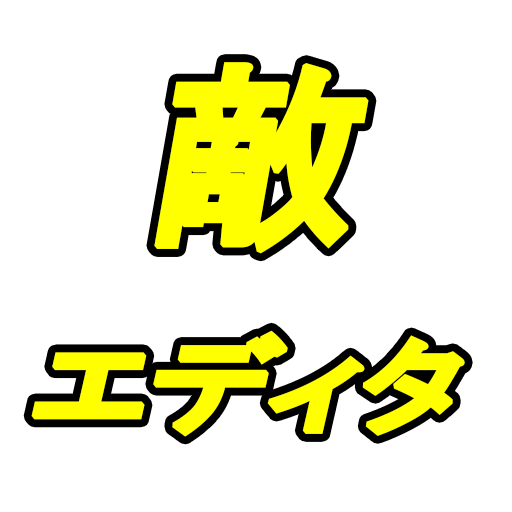
<style>
.page{position:relative;width:512px;height:512px;background:#ffffff}
.page>*{position:absolute;margin:0}
.t1{font:200px "HGPGothicE";letter-spacing:-0.07em;color:#ffff00;font-weight:bold;font-style:italic}
.t2{font:103.9px "HGPGothicE";letter-spacing:-0.07em;color:#ffff00;font-weight:bold;font-style:italic;scale:1.29 1}
</style>
<div class="page">
<p class="t1" style="left:154px;top:62px;width:215px;height:192px">敵</p>
<p class="t2" style="left:31px;top:330px;width:434px;height:107px">エディタ</p>
</div>
